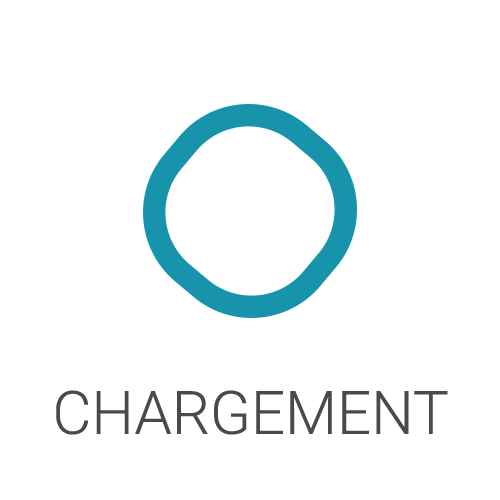
<style>
.page{position:relative;width:500px;height:500px;background:#ffffff}
.page>*{position:absolute;margin:0}
.t1{font:60px "Roboto-Light";color:#4a4a4a}
</style>
<div class="page">
<p class="t1" style="left:56px;top:390px;width:392px;height:45px">CHARGEMENT</p>
</div>
